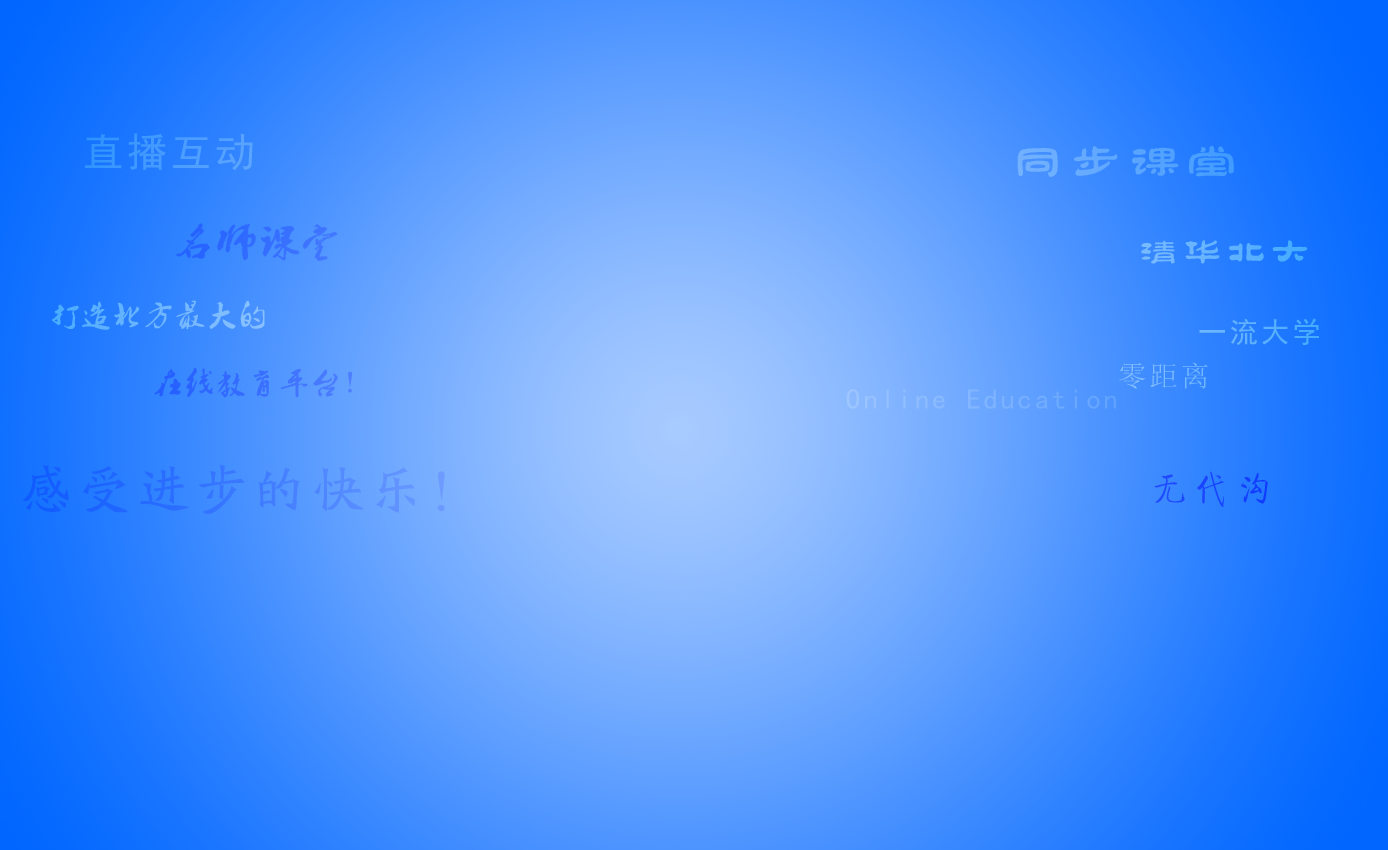
<style>
.page{position:relative;width:1388px;height:850px}
.page>*{position:absolute;margin:0}
.t1{font:40px "SimHei";letter-spacing:0.1em;color:#449aff}
.t2{font:53px "FZXIANGLJW--GB1-0";letter-spacing:0.1em;color:#5aa5ff}
.t3{font:40px "FZXIANGLJW--GB1-0";letter-spacing:0.1em;color:#5eb2ff}
.t4{font:28.6px "2.0-";letter-spacing:0.1em}
.t5{font:28.6px "SimHei";letter-spacing:0.1em;color:#56afff}
.t6{font:28.6px "SimSun";letter-spacing:0.1em;color:#7bbcff}
.t7{font:28.6px "2.0-";letter-spacing:0.1em;color:#336aff}
.t8{font:28.6px "SimHei";letter-spacing:0.1em}
.t9{font:53px "FZBWKSJW--GB1-0";letter-spacing:0.1em}
.t10{font:38.6px "FZQTJW--GB1-0";letter-spacing:0.1em;color:#1842ff}
</style>
<div class="page">
<p class="t1" style="left:85px;top:133px;width:168px;height:38px">直播互动</p>
<p class="t2" style="left:1017px;top:145px;width:217px;height:32px">同步课堂</p>
<p class="t3" style="left:1141px;top:240px;width:167px;height:24px">清华北大</p>
<p class="t4" style="left:52px;top:300px;width:213px;height:30px">打造北方最大的</p>
<p class="t5" style="left:1199px;top:318px;width:120px;height:27px">一流大学</p>
<p class="t6" style="left:1119px;top:362px;width:89px;height:27px">零距离</p>
<p class="t7" style="left:154px;top:367px;width:199px;height:31px">在线教育平台！</p>
<p class="t8" style="left:846px;top:389px;width:270px;height:20px">Online Education</p>
<p class="t9" style="left:22px;top:464px;width:423px;height:50px">感受进步的快乐！</p>
<p class="t10" style="left:1154px;top:471px;width:114px;height:36px">无代沟</p>
</div>
